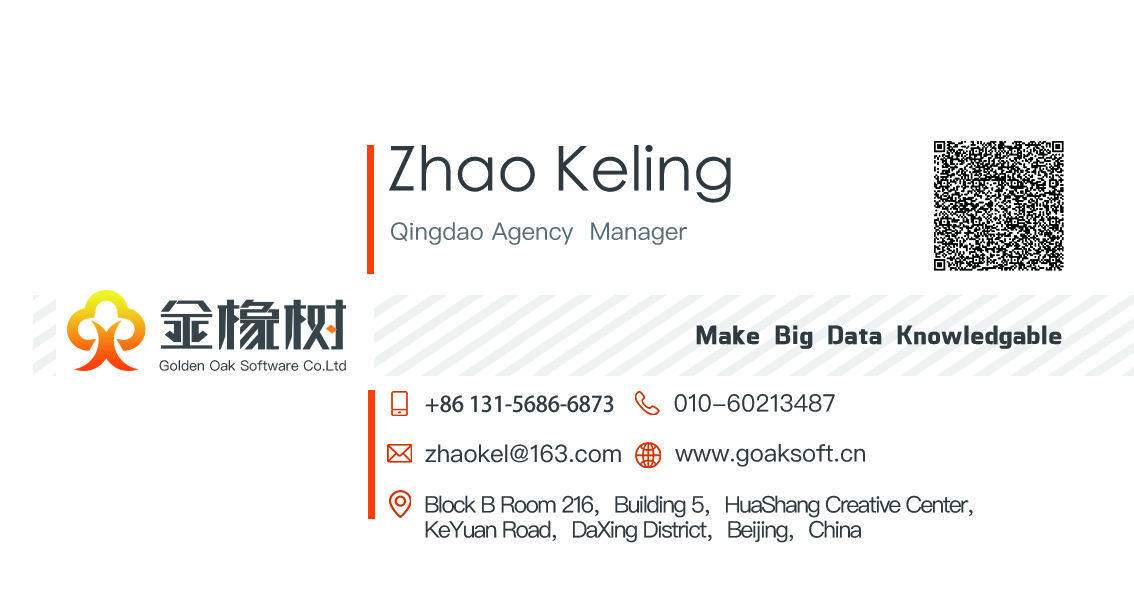
<style>
.page{position:relative;width:1134px;height:602px;background:#ffffff}
.page>*{position:absolute;margin:0}
.t1{font:62px "STHeitiSC-Light";color:#2e3a3f}
.t2{font:24px "PingFangSC-Regular";color:#586d74}
.t3{font:28px "Tensentype-ZhiHeiJ-W5";color:#2e3a3f}
.t4{font:14px "PingFangSC-Regular";color:#2e3a3f}
.t5{font:21.7px "AdobeHeitiStd-Regular";color:#2e3a3f}
.t6{font:24px "PingFangSC-Regular";color:#2e3a3f}
.t7{font:22.9px/25px "PingFangSC-Regular";letter-spacing:-0.075em;color:#2e3a3f}
</style>
<div class="page">
<p class="t1" style="left:389px;top:145px;width:342px;height:58px">Zhao Keling</p>
<p class="t2" style="left:391px;top:222px;width:296px;height:23px">Qingdao Agency  Manager</p>
<p class="t3" style="left:696px;top:325px;width:366px;height:24px">Make Big Data Knowledgable</p>
<p class="t4" style="left:159px;top:360px;width:187px;height:11px">Golden Oak Software Co.Ltd</p>
<p class="t5" style="left:425px;top:395px;width:189px;height:18px">+86 131-5686-6873</p>
<p class="t6" style="left:674px;top:394px;width:161px;height:18px">010-60213487</p>
<p class="t6" style="left:425px;top:444px;width:196px;height:19px">zhaokel@163.com</p>
<p class="t6" style="left:675px;top:444px;width:190px;height:23px">www.goaksoft.cn</p>
<p class="t7" style="left:425px;top:495px;width:548px;height:48px">Block B Room 216，Building 5，HuaShang Creative Center，<br>KeYuan Road，DaXing District，Beijing，China</p>
</div>
